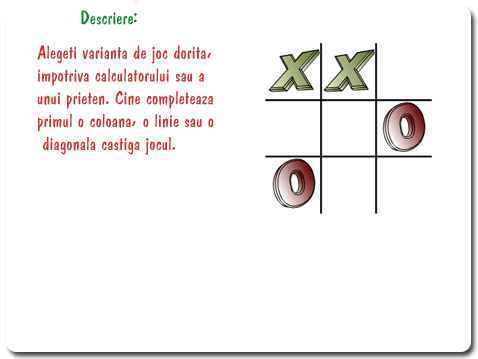
<style>
.page{position:relative;width:478px;height:359px;background:#ffffff}
.page>*{position:absolute;margin:0}
.t1{font:19px "Dominican";color:#0a8630}
.t2{font:19px "Dominican";color:#ce3333}
</style>
<div class="page">
<p class="t1" style="left:81px;top:10px;width:56px;height:15px">Descriere:</p>
<p class="t2" style="left:37px;top:45px;width:177px;height:110px">Alegeti varianta de joc dorita,<br>impotriva calculatorului sau a <br>unui prieten. Cine completeaza <br>primul o coloana, o linie sau o<br> diagonala castiga jocul.</p>
</div>
